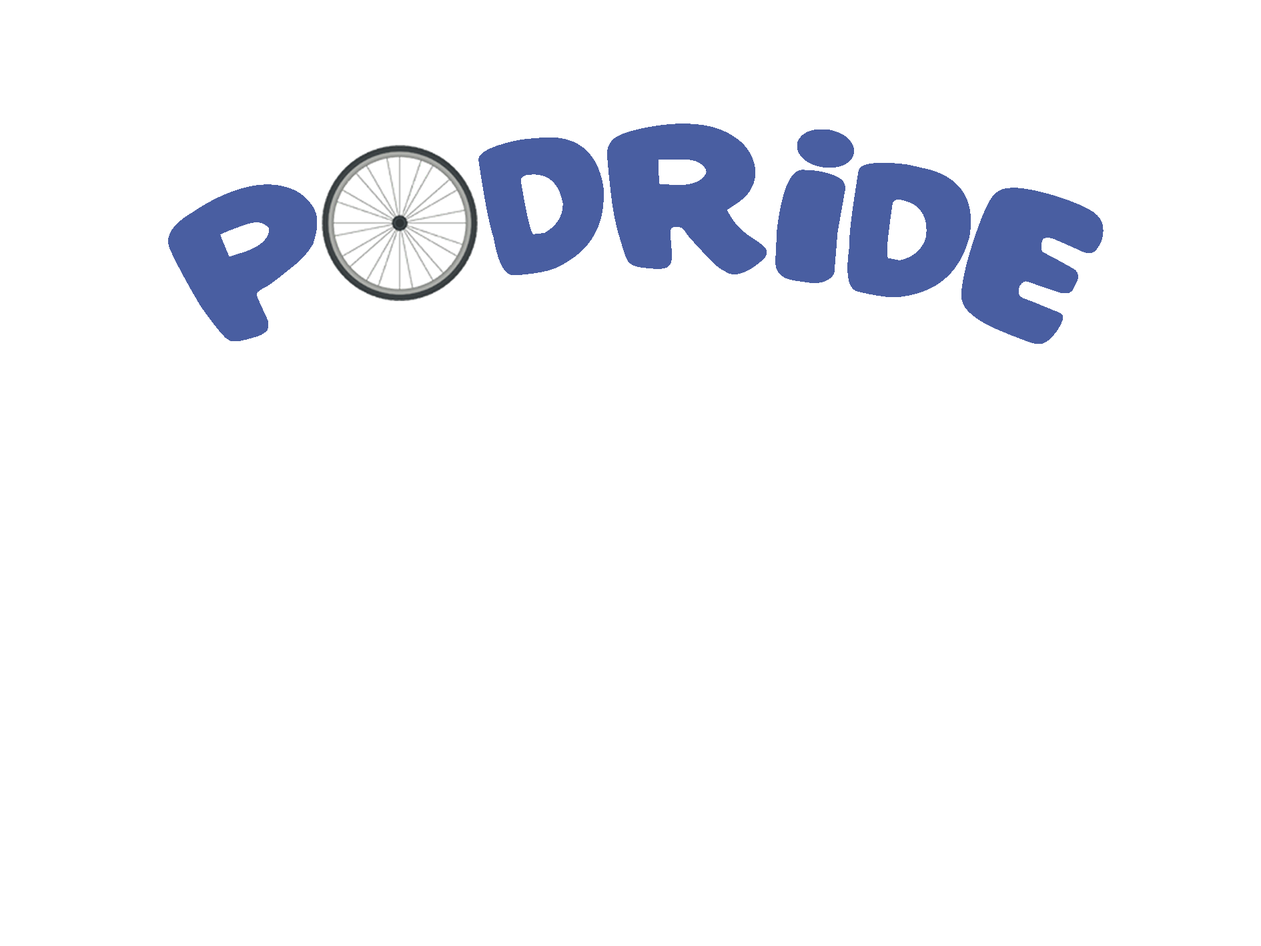
<style>
.page{position:relative;width:1261px;height:946px;background:#ffffff}
.page>*{position:absolute;margin:0}
.t1{font:200.2px "TOYSRUS-BABIESRUS-32273";color:#495ea1}
</style>
<div class="page">
<p class="t1" style="left:168px;top:123px;width:936px;height:221px">PodRide</p>
</div>
